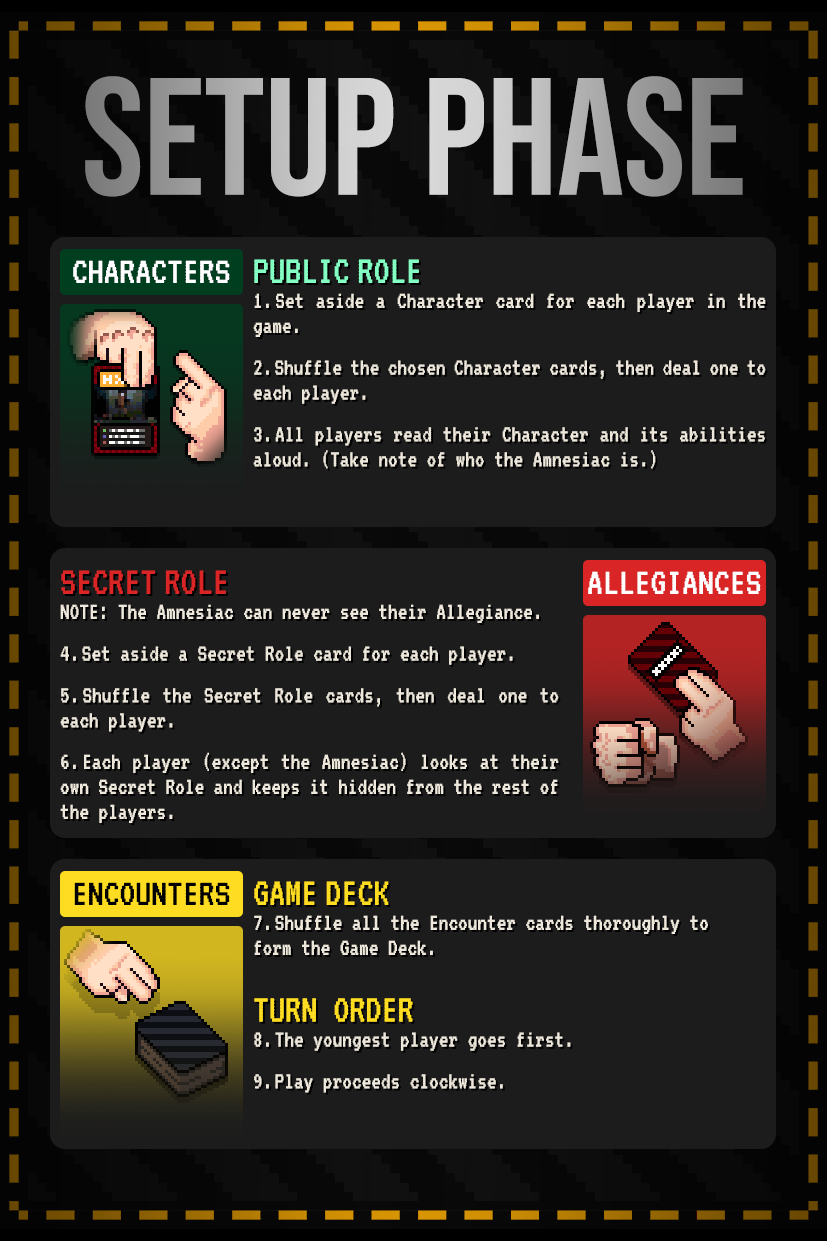
<style>
.page{position:relative;width:827px;height:1241px;background:#1c1c1c}
.page>*{position:absolute;margin:0}
.t1{font:166.7px "BebasNeue-Regular"}
.t2{font:39.7px "VT323-Regular";color:#ffffff}
.t3{font:25px/25px "VT323-Regular";color:#eee8dc;scale:0.96 1}
.t4{font:41.7px "VT323-Regular";color:#84ffc3;scale:0.96 1}
.t5{font:41.7px "VT323-Regular";color:#d92525;scale:0.96 1}
.t6{font:41.7px "VT323-Regular";color:#fedc22;scale:0.96 1}
.t7{font:39.7px "VT323-Regular";color:#000000}
</style>
<div class="page">
<p class="t1" style="left:85px;top:76px;width:658px;height:121px">Setup PHASE</p>
<p class="t2" style="left:73px;top:260px;width:157px;height:23px">CHARACTERS</p>
<p class="t3" style="left:253px;top:259px;width:513px;height:210px;text-align:justify"><span class="t4">PUBLIC ROLE<br></span>1. Set aside a Character card for each player in the game.<br><br>2. Shuffle the chosen Character cards, then deal one to each player.<br><br>3. All players read their Character and its abilities aloud. (Take note of who the Amnesiac is.)</p>
<p class="t3" style="left:60px;top:570px;width:499px;height:253px;text-align:justify"><span class="t5">SECRET ROLE<br></span>NOTE: The Amnesiac can never see their Allegiance.<br><br>4. Set aside a Secret Role card for each player.<br><br>5. Shuffle the Secret Role cards, then deal one to each player.<br><br>6. Each player (except the Amnesiac) looks at their own Secret Role and keeps it hidden from the rest of the players.</p>
<p class="t2" style="left:588px;top:571px;width:173px;height:23px">ALLEGIANCES</p>
<p class="t3" style="left:254px;top:881px;width:454px;height:212px;text-align:justify"><span class="t6">GAME DECK<br></span>7. Shuffle all the Encounter cards thoroughly to <br>form the Game Deck.<br><br><span class="t6">TURN ORDER<br></span>8. The youngest player goes first.<br><br>9. Play proceeds clockwise.</p>
<p class="t7" style="left:74px;top:882px;width:156px;height:23px">ENCOUNTERS</p>
</div>
